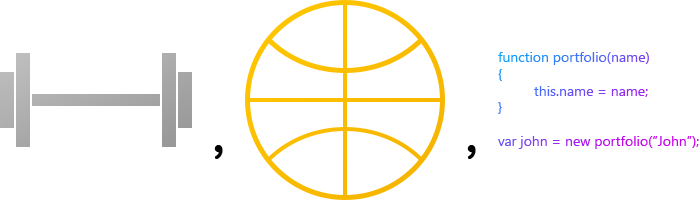
<style>
.page{position:relative;width:700px;height:200px;background:#ffffff}
.page>*{position:absolute;margin:0}
.t1{font:14px "SegoeUI"}
</style>
<div class="page">
<p class="t1" style="left:498px;top:52px;width:201px;height:97px">function portfolio(name)<br>{<br> this.name = name;<br>}<br><br>var john = new portfolio(”John”);</p>
</div>
